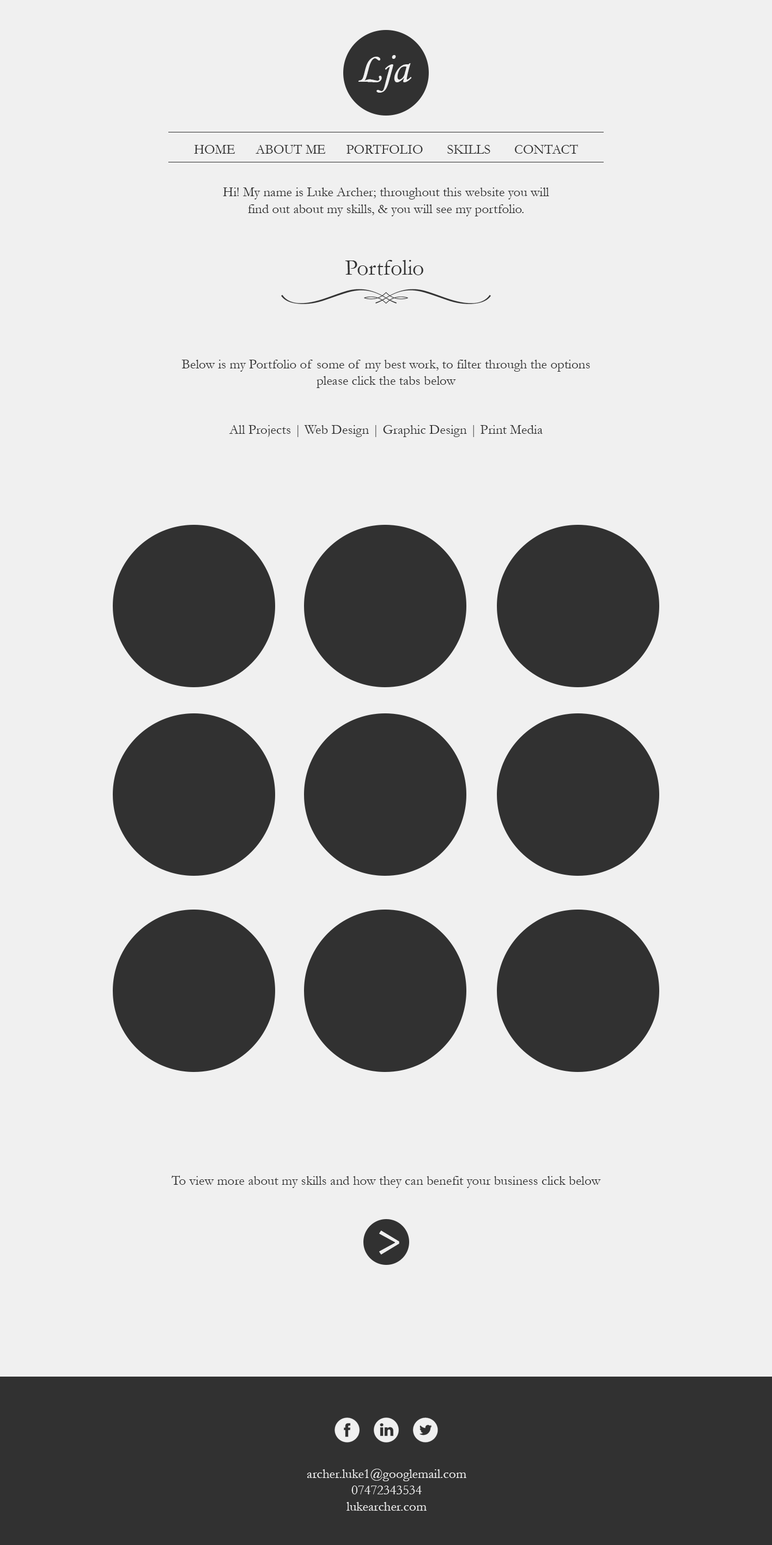
<style>
.page{position:relative;width:772px;height:1545px;background:#f0f0f0}
.page>*{position:absolute;margin:0}
.t1{font:43.2px "MonotypeCorsiva";color:#f0f0f0}
.t2{font:13.6px "Garamond";color:#2f2f2f}
.t3{font:22.7px "Garamond";color:#313131}
.t4{font:13.6px "Garamond";color:#313131}
.t5{font:50px "Candara";color:#f0f0f0}
.t6{font:13.6px "Garamond";color:#f0f0f0}
</style>
<div class="page">
<p class="t1" style="left:358px;top:55px;width:54px;height:38px">Lja</p>
<p class="t2" style="left:194px;top:144px;width:384px;height:10px">HOME      ABOUT ME      PORTFOLIO       SKILLS       CONTACT</p>
<p class="t2" style="left:223px;top:187px;width:326px;height:29px;text-align:center">Hi! My name is Luke Archer; throughout this website you will find out about my skills, &amp; you will see my portfolio.</p>
<p class="t3" style="left:345px;top:260px;width:78px;height:15px">Portfolio</p>
<p class="t4" style="left:181px;top:360px;width:409px;height:77px;text-align:center">Below is my Portfolio of some of my best work, to filter through the options please click the tabs below<br><br><br>All Projects | Web Design | Graphic Design | Print Media</p>
<p class="t4" style="left:171px;top:1175px;width:430px;height:13px">To view more about my skills and how they can benefit your business click below</p>
<p class="t5" style="left:379px;top:1230px;width:20px;height:24px">&gt;</p>
<p class="t6" style="left:307px;top:1468px;width:159px;height:42px;text-align:center">archer.luke1@googlemail.com<br>07472343534<br>lukearcher.com</p>
</div>
